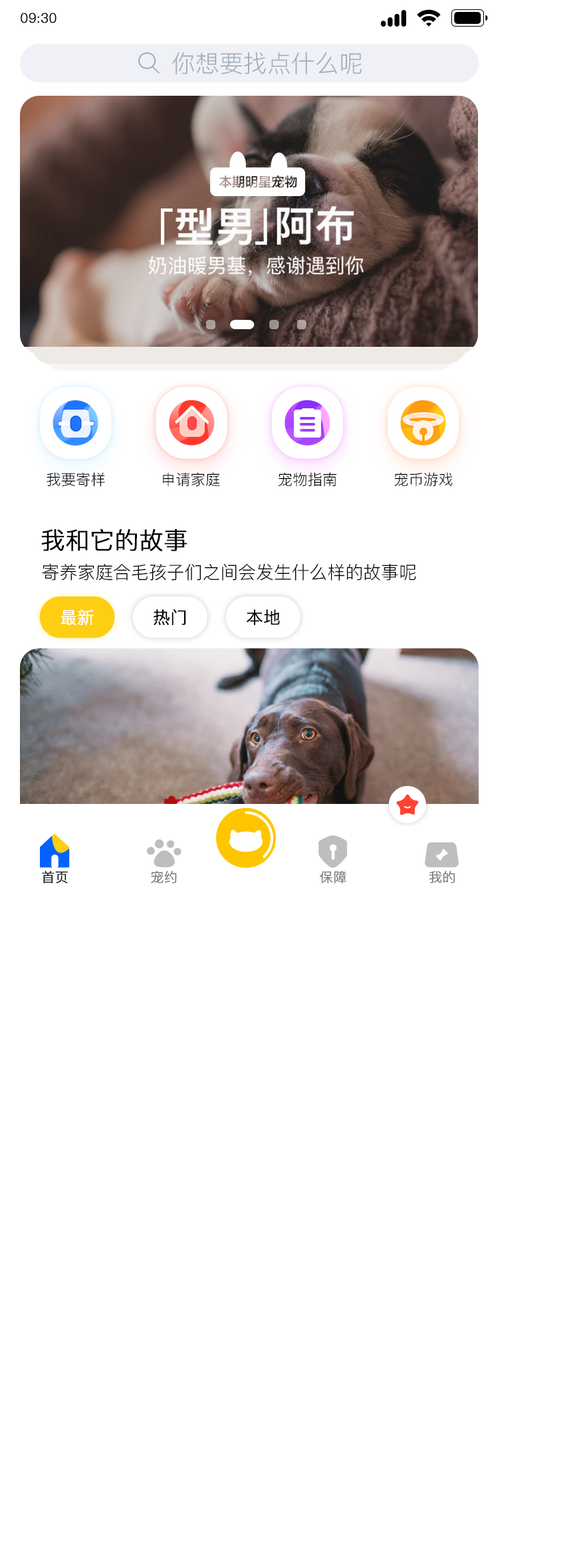
<style>
.page{position:relative;width:585px;height:1568px;background:#ffffff}
.page>*{position:absolute;margin:0}
.t1{font:13.3px "PingFang-SC-Regular";color:#000000;font-weight:bold}
.t2{font:23.9px "PingFang-SC-Regular";color:#a4afbd}
.t3{font:14.9px "PingFang-SC-Regular";color:#000000}
.t4{font:23.9px "PingFang-SC-Regular";color:#000000;font-weight:bold}
.t5{font:17.9px "PingFang-SC-Regular";color:#000000}
.t6{font:16.8px "PingFang-SC-Regular";color:#ffffff;font-weight:bold}
.t7{font:16.8px "PingFang-SC-Regular";color:#000000;font-weight:bold}
.t8{font:13.3px "PingFang-SC-Regular";color:#7a7a7a;font-weight:bold}
</style>
<div class="page">
<p class="t1" style="left:21px;top:13px;width:36px;height:10px">09:30</p>
<p class="t2" style="left:172px;top:52px;width:190px;height:22px">你想要找点什么呢</p>
<p class="t3" style="left:47px;top:472px;width:58px;height:15px">我要寄样</p>
<p class="t3" style="left:163px;top:472px;width:57px;height:15px">申请家庭</p>
<p class="t3" style="left:279px;top:472px;width:58px;height:15px">宠物指南</p>
<p class="t3" style="left:394px;top:472px;width:59px;height:15px">宠币游戏</p>
<p class="t4" style="left:41px;top:529px;width:147px;height:22px">我和它的故事</p>
<p class="t5" style="left:42px;top:563px;width:374px;height:18px">寄养家庭合毛孩子们之间会发生什么样的故事呢</p>
<p class="t6" style="left:61px;top:609px;width:33px;height:16px">最新</p>
<p class="t7" style="left:154px;top:609px;width:32px;height:16px">热门</p>
<p class="t7" style="left:247px;top:609px;width:33px;height:16px">本地</p>
<p class="t1" style="left:42px;top:870px;width:26px;height:14px">首页</p>
<p class="t8" style="left:151px;top:870px;width:26px;height:14px">宠约</p>
<p class="t8" style="left:320px;top:870px;width:26px;height:14px">保障</p>
<p class="t8" style="left:429px;top:870px;width:27px;height:14px">我的</p>
</div>
